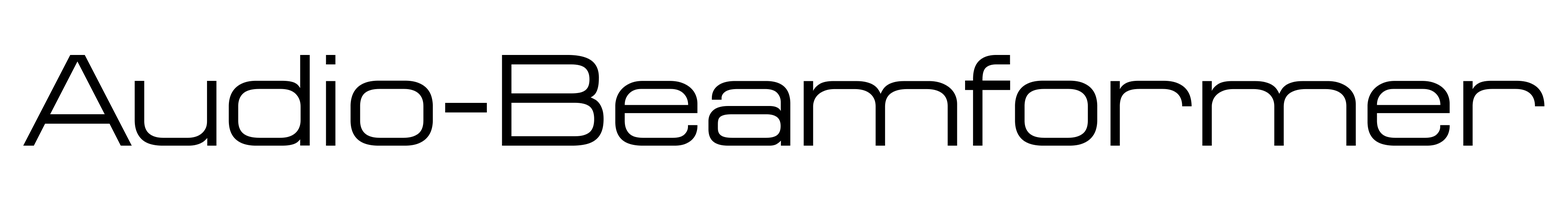
<style>
.page{position:relative;width:1568px;height:201px;background:#ffffff}
.page>*{position:absolute;margin:0}
.t1{font:130.7px "MicroExtendFLF";color:#000000}
</style>
<div class="page">
<p class="t1" style="left:23px;top:55px;width:1521px;height:90px">Audio-Beamformer</p>
</div>
